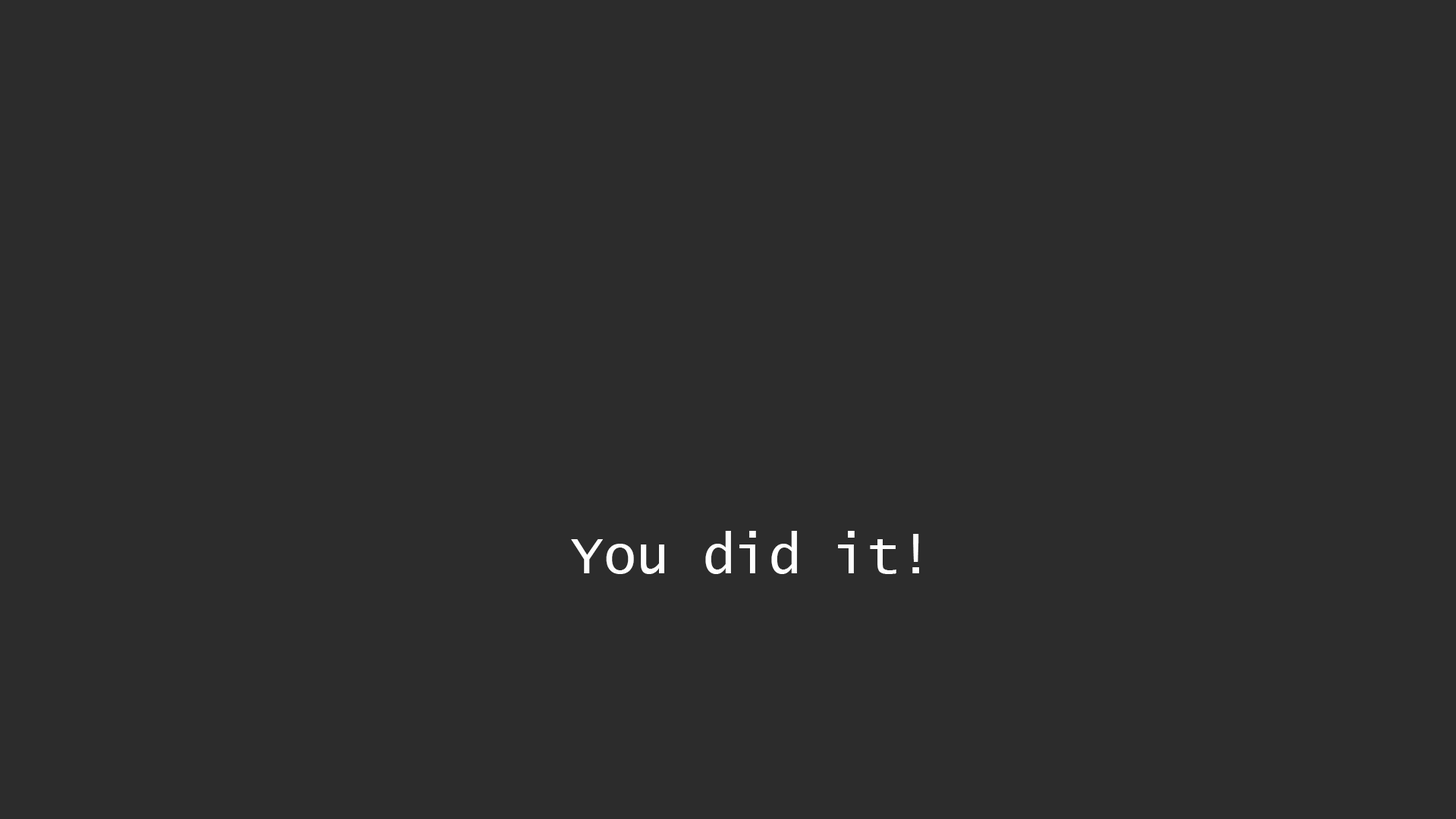
<style>
.page{position:relative;width:1456px;height:819px;background:#2c2c2c}
.page>*{position:absolute;margin:0}
.t1{font:54.6px "LucidaConsole";color:#fefefe}
</style>
<div class="page">
<p class="t1" style="left:571px;top:531px;width:348px;height:43px">You did it!</p>
</div>
